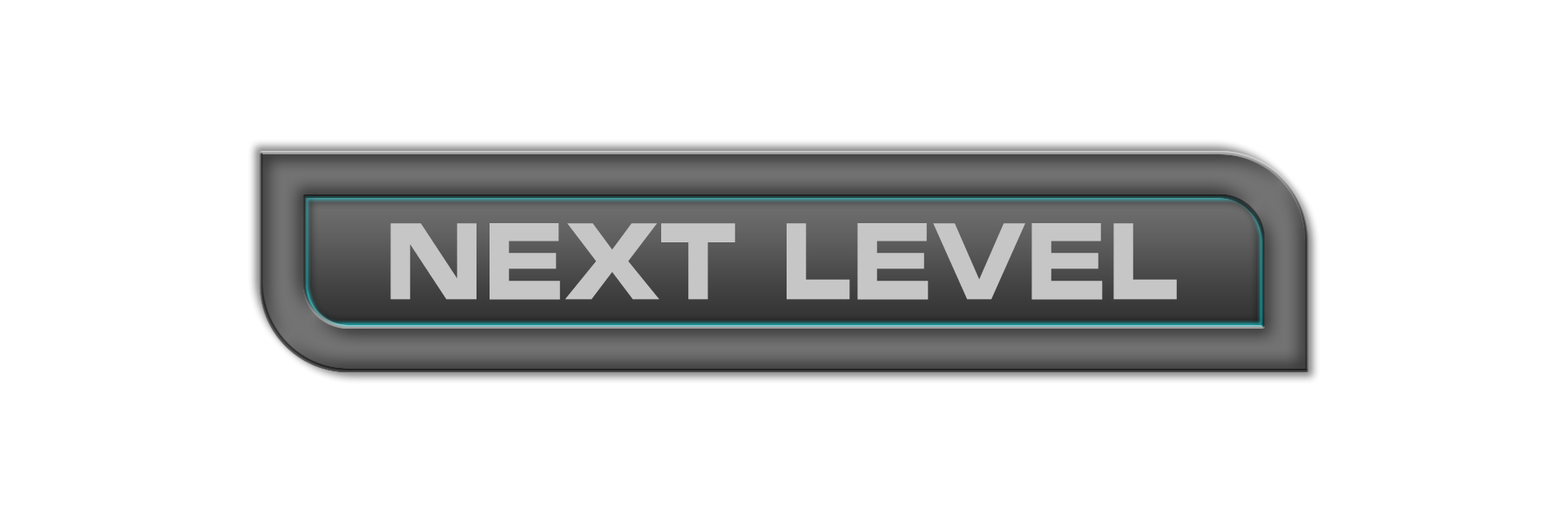
<style>
.page{position:relative;width:1568px;height:523px;background:#ffffff}
.page>*{position:absolute;margin:0}
.t1{font:104.5px "EurostileLTStd-BoldEx2";color:#c6c6c6;scale:0.83 1}
</style>
<div class="page">
<p class="t1" style="left:390px;top:223px;width:787px;height:77px">NEXT LEVEL</p>
</div>
